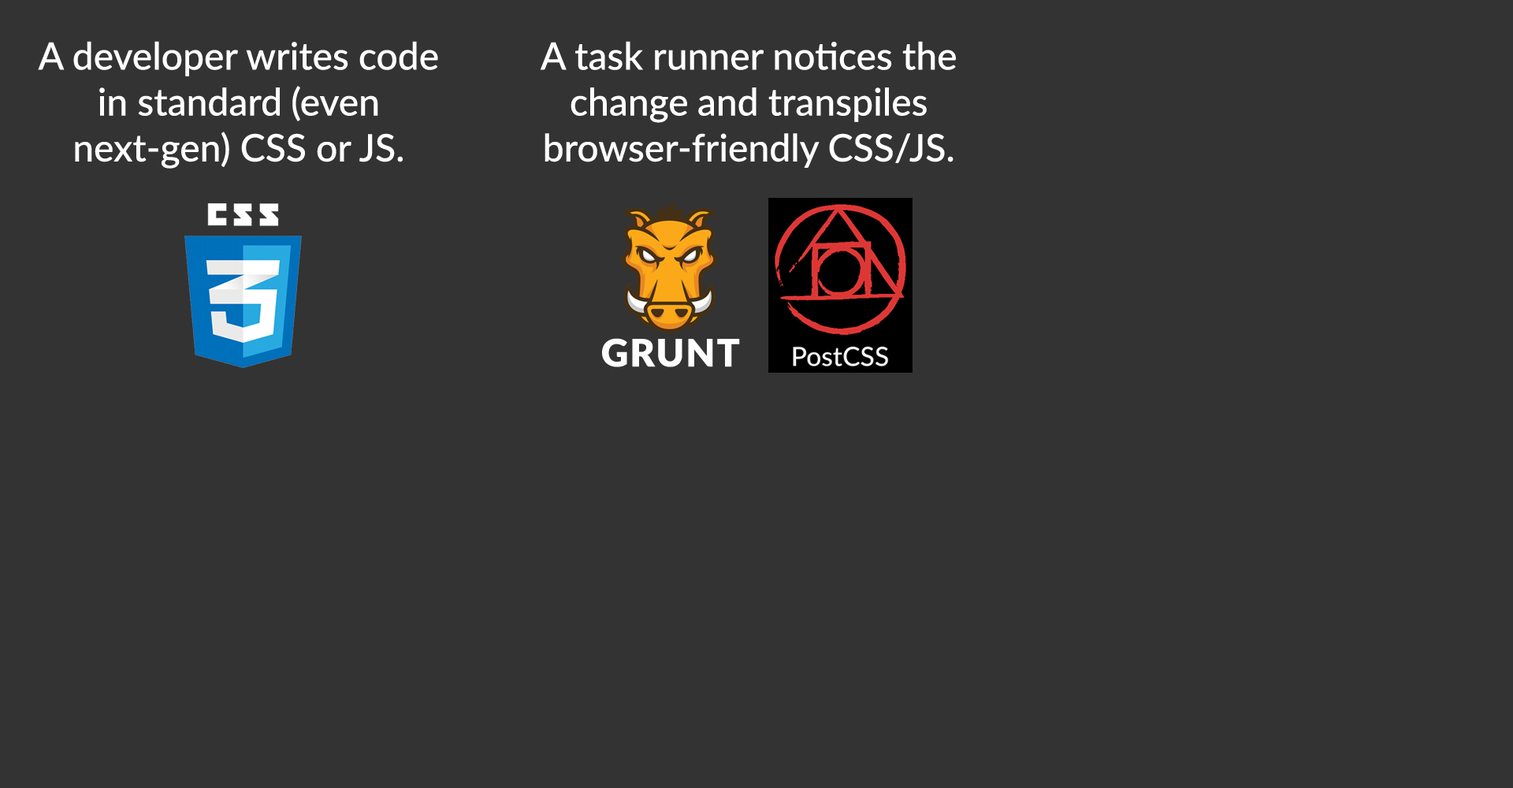
<style>
.page{position:relative;width:1513px;height:788px;background:#333333}
.page>*{position:absolute;margin:0}
.t1{font:37.8px/45.9px "Lato-Medium";color:#ffffff}
.t2{font:37.8px "Lato-Black";letter-spacing:0.04em;color:#ffffff}
</style>
<div class="page">
<p class="t1" style="left:38px;top:41px;width:400px;height:128px;text-align:center">A developer writes code in standard (even next-gen) CSS or JS.</p>
<p class="t1" style="left:540px;top:41px;width:416px;height:127px;text-align:center">A task runner notices the change and transpiles browser-friendly CSS/JS.</p>
<p class="t2" style="left:602px;top:338px;width:138px;height:29px">GRUNT</p>
</div>
